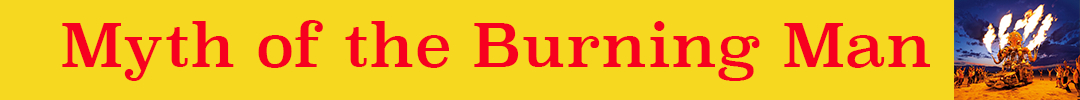
<style>
.page{position:relative;width:1080px;height:100px;background:#f5d81f}
.page>*{position:absolute;margin:0}
.t1{font:60px "Superclarendon-Regular";color:#f7001f}
</style>
<div class="page">
<p class="t1" style="left:62px;top:20px;width:868px;height:61px">Myth of the Burning Man</p>
</div>
